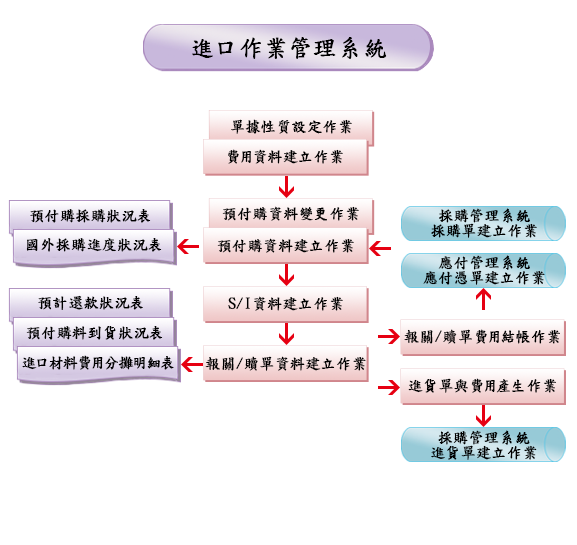
<style>
.page{position:relative;width:577px;height:545px;background:#ffffff}
.page>*{position:absolute;margin:0}
.t1{font:24px "DFKaiShu-SB-Estd-BF";color:#000000;font-weight:bold}
.t2{font:15px "DFKaiShu-SB-Estd-BF";color:#000000;font-weight:bold}
.t3{font:15px "DFKaiShu-SB-Estd-BF";letter-spacing:-0.25em;color:#000000;font-weight:bold}
.t4{font:15px/15px "DFKaiShu-SB-Estd-BF";color:#000000;font-weight:bold}
.t5{font:15px "DFKaiShu-SB-Estd-BF";letter-spacing:-0.1em;color:#000000;font-weight:bold}
.t6{font:15px "DFKaiShu-SB-Estd-BF";letter-spacing:-0.2em;color:#000000;font-weight:bold}
</style>
<div class="page">
<p class="t1" style="left:192px;top:37px;width:195px;height:22px">進口作業管理系統</p>
<p class="t2" style="left:231px;top:119px;width:121px;height:15px">單據性質設定作業</p>
<p class="t2" style="left:228px;top:149px;width:115px;height:15px">費<span class="t3">用資 </span>料建立作業</p>
<p class="t2" style="left:30px;top:209px;width:121px;height:14px">預付購採購狀況表</p>
<p class="t2" style="left:222px;top:206px;width:137px;height:15px">預付購資料變更作業</p>
<p class="t4" style="left:431px;top:208px;width:106px;height:30px;text-align:center">採購管理系統<br>採購單建立作業</p>
<p class="t2" style="left:26px;top:238px;width:136px;height:14px">國外採購進度狀況表</p>
<p class="t2" style="left:217px;top:238px;width:137px;height:15px">預付購資料建立作業</p>
<p class="t4" style="left:423px;top:255px;width:122px;height:30px;text-align:center">應付管理系統<br>應付憑單建立作業</p>
<p class="t2" style="left:38px;top:295px;width:105px;height:15px">預計還款狀況表</p>
<p class="t2" style="left:228px;top:296px;width:115px;height:15px">S/I資料建立作業</p>
<p class="t2" style="left:26px;top:326px;width:137px;height:14px">預付購料到貨狀況表</p>
<p class="t2" style="left:404px;top:329px;width:156px;height:15px">報關/贖單費<span class="t3">用結 </span>帳作業</p>
<p class="t5" style="left:22px;top:355px;width:152px;height:15px">進口材料費 <span class="t6">用分 </span>攤明細表</p>
<p class="t2" style="left:205px;top:356px;width:161px;height:15px">報關/贖單資料建立作業</p>
<p class="t2" style="left:408px;top:378px;width:148px;height:15px">進貨單與費<span class="t3">用產 </span>生作業</p>
<p class="t4" style="left:431px;top:430px;width:106px;height:30px;text-align:center">採購管理系統<br>進貨單建立作業</p>
</div>
